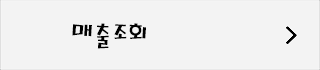
<style>
.page{position:relative;width:320px;height:70px;background:#f3f3f3}
.page>*{position:absolute;margin:0}
.t1{font:25.5px "MagicR-HM";letter-spacing:-0.01em;color:#000000}
</style>
<div class="page">
<p class="t1" style="left:72px;top:23px;width:74px;height:26px">매출조회</p>
<p class="t1" style="left:72px;top:23px;width:74px;height:26px">매출조회</p>
</div>
